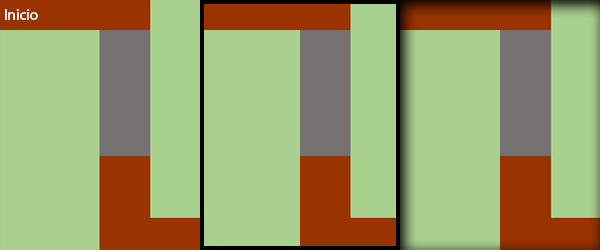
<style>
.page{position:relative;width:600px;height:250px;background:#a9d08e}
.page>*{position:absolute;margin:0}
.t1{font:15px "MyriadHebrew-Regular";color:#ffffff}
</style>
<div class="page">
<p class="t1" style="left:5px;top:9px;width:33px;height:11px">Inicio</p>
</div>
